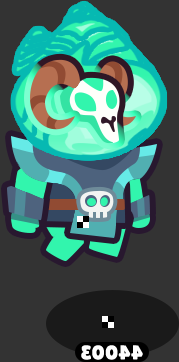
<style>
.page{position:relative;width:179px;height:362px;background:#333333}
.page>*{position:absolute;margin:0}
.t1{font:19.9px "LilitaOne";color:#ffffff;font-weight:bold}
</style>
<div class="page">
<p class="t1" style="left:81px;top:345px;width:62px;height:15px;rotate:180deg">44003</p>
</div>
